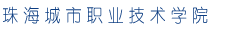
<style>
.page{position:relative;width:229px;height:34px;background:#ffffff}
.page>*{position:absolute;margin:0}
.t1{font:18px "YouYuan";letter-spacing:0.3em;color:#0b3c81;scale:0.9 1}
</style>
<div class="page">
<p class="t1" style="left:3px;top:6px;width:205px;height:18px">珠海城市职业技术学院</p>
</div>
